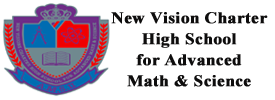
<style>
.page{position:relative;width:275px;height:100px;background:#ffffff}
.page>*{position:absolute;margin:0}
.t1{font:16.2px/21px "TimesNewRomanPS-BoldMT";color:#0e0d0d;font-weight:bold;scale:1.06 1}
</style>
<div class="page">
<p class="t1" style="left:111px;top:12px;width:157px;height:75px;text-align:center">New Vision Charter <br>High School<br>for Advanced <br>Math &amp; Science</p>
</div>
